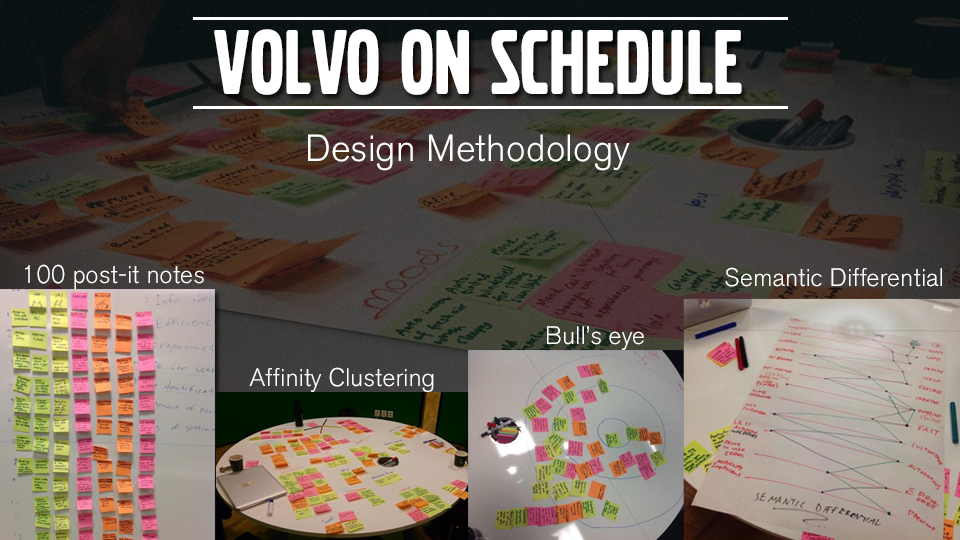
<style>
.page{position:relative;width:960px;height:540px}
.page>*{position:absolute;margin:0}
.t1{font:96px "VolvoBroad";letter-spacing:0.005em;color:#ffffff}
.t2{font:37.5px "VolvoSansPro-Light";letter-spacing:0.005em;color:#ffffff}
.t3{font:25px "VolvoSansPro-Light";letter-spacing:0.005em;color:#ffffff}
</style>
<div class="page">
<p class="t1" style="left:214px;top:29px;width:528px;height:66px">Volvo on schedule</p>
<p class="t2" style="left:308px;top:134px;width:322px;height:37px">Design Methodology</p>
<p class="t3" style="left:25px;top:264px;width:179px;height:26px">100 post-it notes</p>
<p class="t3" style="left:725px;top:267px;width:217px;height:20px">Semantic Differential</p>
<p class="t3" style="left:547px;top:326px;width:97px;height:24px">Bull’s eye</p>
<p class="t3" style="left:249px;top:367px;width:185px;height:25px">Affinity Clustering</p>
</div>
